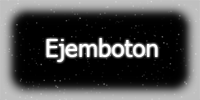
<style>
.page{position:relative;width:200px;height:100px;background:#000000}
.page>*{position:absolute;margin:0}
.t1{font:24px "Tahoma";color:#ffffff}
</style>
<div class="page">
<p class="t1" style="left:46px;top:38px;width:112px;height:24px">Ejemboton</p>
</div>
